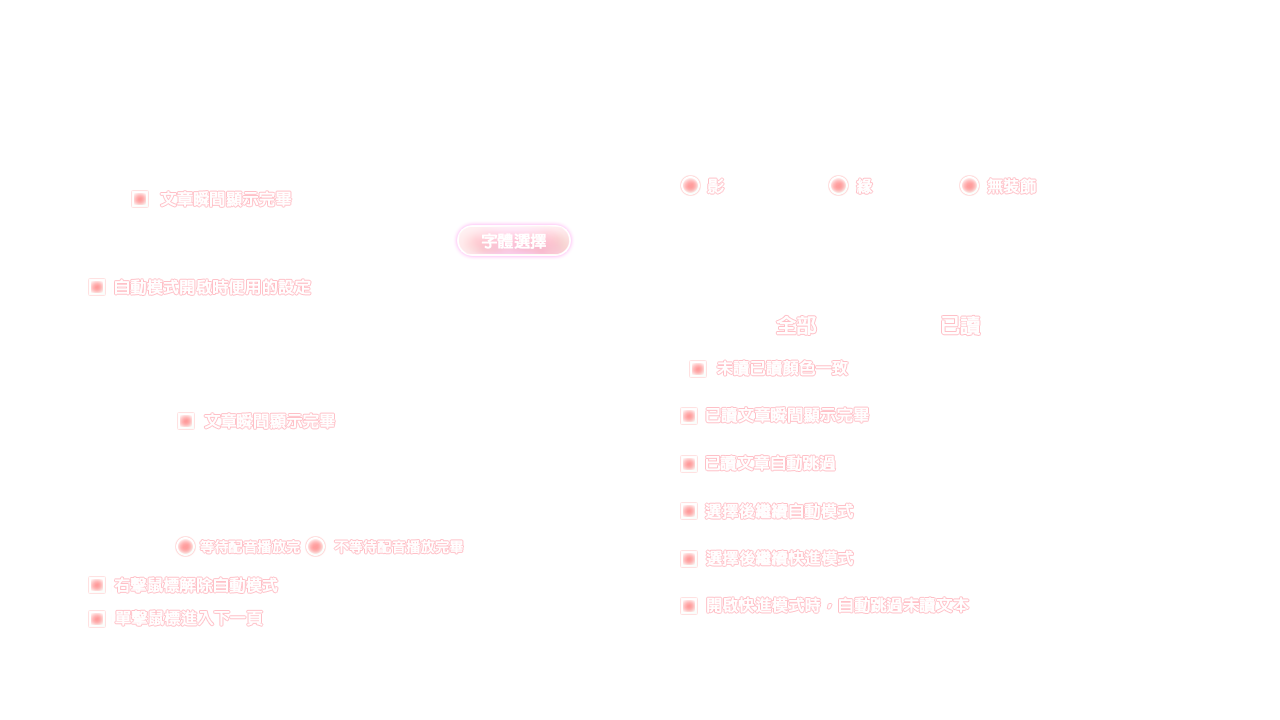
<style>
.page{position:relative;width:1280px;height:720px;background:#ffffff}
.page>*{position:absolute;margin:0}
.t1{font:16px "AdobeFanHeitiStd-Bold";color:#fffefe;font-weight:bold}
.t2{font:16px "AdobeFanHeitiStd-Bold";color:#ffffff;font-weight:bold}
.t3{font:20px "AdobeFanHeitiStd-Bold";color:#fffefe;font-weight:bold}
.t4{font:14px "AdobeFanHeitiStd-Bold";color:#fffefe;font-weight:bold}
</style>
<div class="page">
<p class="t1" style="left:707px;top:178px;width:17px;height:16px">影</p>
<p class="t1" style="left:856px;top:178px;width:17px;height:16px">緣</p>
<p class="t1" style="left:987px;top:178px;width:49px;height:16px">無裝飾</p>
<p class="t1" style="left:160px;top:191px;width:132px;height:16px">文章瞬間顯示完畢</p>
<p class="t2" style="left:481px;top:233px;width:65px;height:16px">字體選擇</p>
<p class="t1" style="left:115px;top:279px;width:196px;height:16px">自動模式開啟時便用的設定</p>
<p class="t3" style="left:776px;top:315px;width:41px;height:20px">全部</p>
<p class="t3" style="left:942px;top:315px;width:38px;height:21px">已讀</p>
<p class="t1" style="left:717px;top:360px;width:131px;height:16px">未讀已讀顏色一致</p>
<p class="t1" style="left:204px;top:413px;width:131px;height:16px">文章瞬間顯示完畢</p>
<p class="t1" style="left:706px;top:407px;width:163px;height:16px">已讀文章瞬間顯示完畢</p>
<p class="t1" style="left:706px;top:455px;width:130px;height:16px">已讀文章自動跳過</p>
<p class="t1" style="left:705px;top:503px;width:149px;height:16px">選擇後繼續自動模式</p>
<p class="t4" style="left:200px;top:540px;width:100px;height:14px">等待配音播放完</p>
<p class="t4" style="left:334px;top:540px;width:129px;height:14px">不等待配音播放完畢</p>
<p class="t1" style="left:706px;top:550px;width:148px;height:16px">選擇後繼續快進模式</p>
<p class="t1" style="left:114px;top:577px;width:164px;height:16px">右擊鼠標解除自動模式</p>
<p class="t1" style="left:707px;top:597px;width:262px;height:16px">開啟快進模式時，自動跳過未讀文本</p>
<p class="t1" style="left:115px;top:610px;width:148px;height:16px">單擊鼠標進入下一頁</p>
</div>
